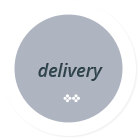
<style>
.page{position:relative;width:140px;height:140px;background:#ffffff}
.page>*{position:absolute;margin:0}
.t1{font:18px "OpenSans-SemiboldItalic";color:#30444c}
</style>
<div class="page">
<p class="t1" style="left:38px;top:63px;width:65px;height:18px">delivery</p>
</div>
